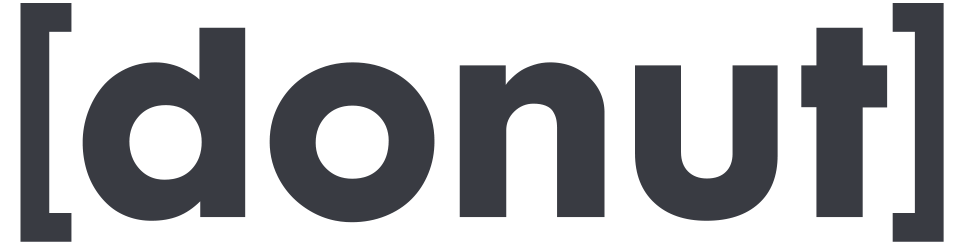
<style>
.page{position:relative;width:968px;height:251px;background:#ffffff}
.page>*{position:absolute;margin:0}
.t1{font:246.6px "FuturaHEMAProOT-Bold";color:#393b42}
</style>
<div class="page">
<p class="t1" style="left:20px;top:3px;width:924px;height:239px">[donut]</p>
</div>
